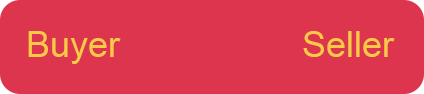
<style>
.page{position:relative;width:424px;height:94px;background:#dd354d}
.page>*{position:absolute;margin:0}
.t1{font:36px "ArialMT";color:#fac947}
</style>
<div class="page">
<p class="t1" style="left:28px;top:31px;width:93px;height:33px">Buyer</p>
<p class="t1" style="left:303px;top:31px;width:92px;height:26px">Seller</p>
</div>
